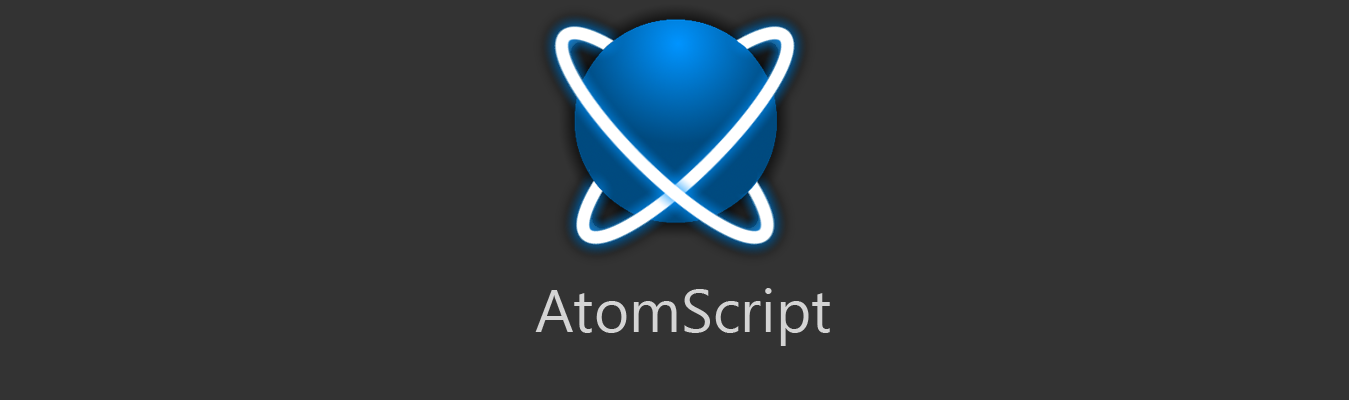
<style>
.page{position:relative;width:1349px;height:400px;background:#333333}
.page>*{position:absolute;margin:0}
.t1{font:60px "SegoeUI";color:#d4d4d4}
</style>
<div class="page">
<p class="t1" style="left:535px;top:288px;width:295px;height:58px">AtomScript</p>
</div>
